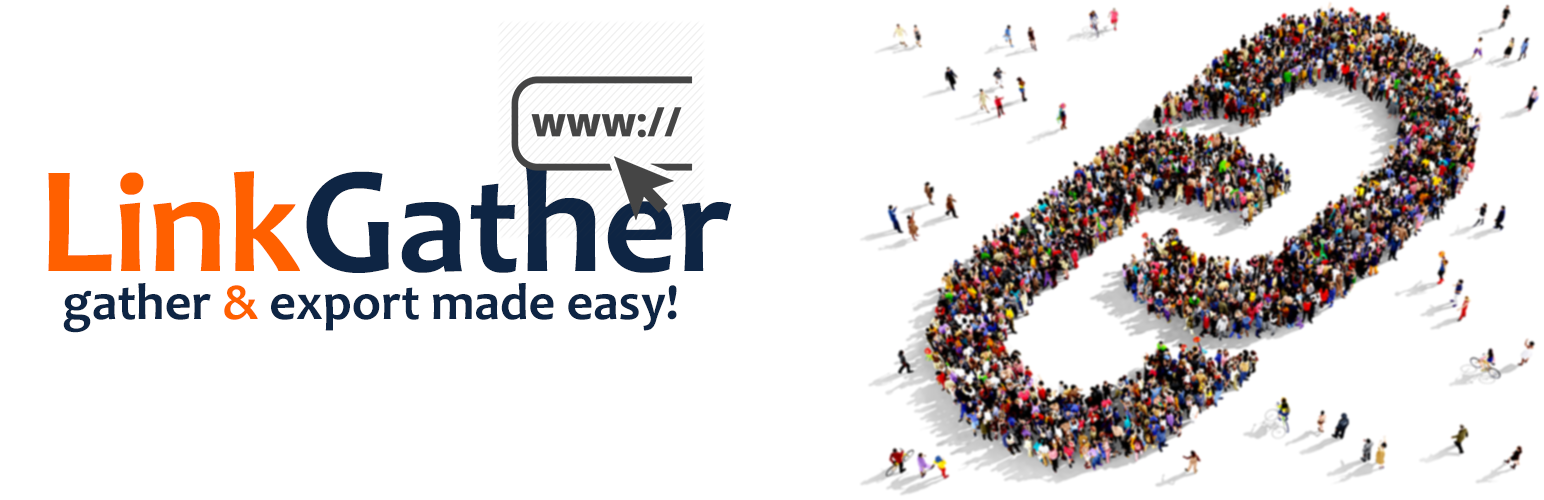
<style>
.page{position:relative;width:1544px;height:500px;background:#ffffff}
.page>*{position:absolute;margin:0}
.t1{font:144px "Candara-Bold";color:#ff6000}
.t2{font:154px "Candara-Bold";color:#ff6000}
.t3{font:154px "Candara-Bold";color:#0e2544}
.t4{font:144px "Candara-Bold";color:#0e2544}
.t5{font:152px "Candara-Bold";color:#0e2544}
.t6{font:52px "Candara-Bold";color:#0e2544}
.t7{font:52px "Candara-Bold";color:#ff6000}
</style>
<div class="page">
<p class="t1" style="left:48px;top:165px;width:684px;height:108px"><span class="t2">L</span>ink<span class="t3">G</span><span class="t4">at</span><span class="t5">h</span><span class="t4">er</span></p>
<p class="t6" style="left:63px;top:283px;width:614px;height:50px">gather <span class="t7">&amp;</span> export made easy!</p>
</div>
